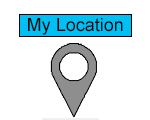
<style>
.page{position:relative;width:150px;height:120px;background:#ffffff}
.page>*{position:absolute;margin:0}
.t1{font:18px "ArialMT";color:#000000}
</style>
<div class="page">
<p class="t1" style="left:28px;top:18px;width:95px;height:17px">My Location</p>
</div>
